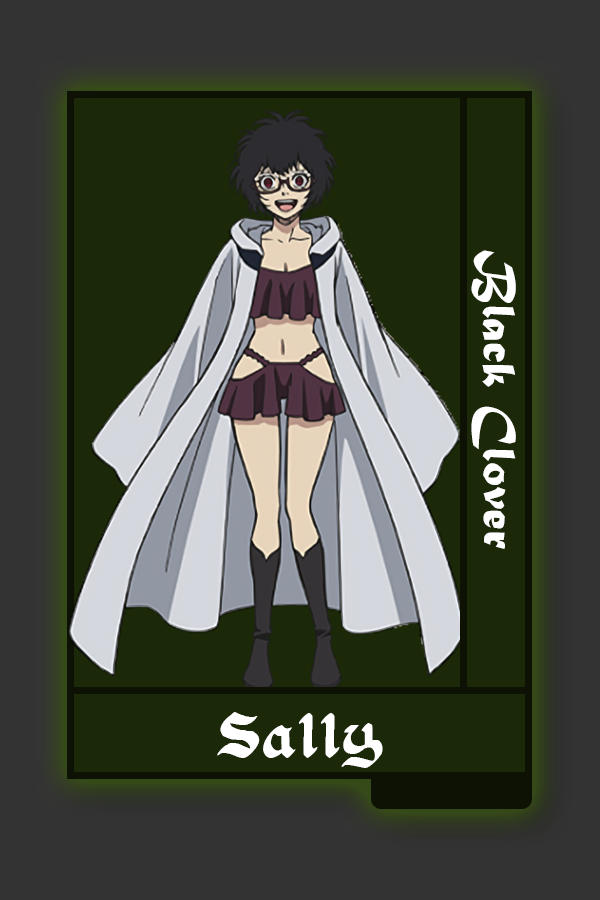
<style>
.page{position:relative;width:600px;height:900px;background:#1b2908}
.page>*{position:absolute;margin:0}
.t1{font:48.8px "MaturaMTScriptCapitals";color:#ffffff}
.t2{font:54.8px "FloranteatLaura";color:#ffffff}
</style>
<div class="page">
<p class="t1" style="left:471px;top:250px;width:45px;height:299px;rotate:90deg">Black Clover</p>
<p class="t2" style="left:217px;top:712px;width:166px;height:56px">Sally</p>
</div>
